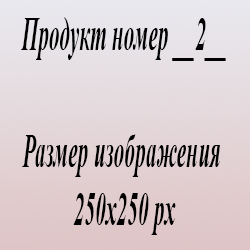
<style>
.page{position:relative;width:250px;height:250px}
.page>*{position:absolute;margin:0}
.t1{font:48.7px "TimesNewRomanPS-BoldItalicMT";color:#000000;scale:0.44 1}
</style>
<div class="page">
<p class="t1" style="left:21px;top:17px;width:205px;height:218px;text-align:center">Продукт номер __2__<br><br>Размер изображения <br>250х250 px</p>
</div>
